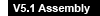
<style>
.page{position:relative;width:100px;height:16px;background:#000000}
.page>*{position:absolute;margin:0}
.t1{font:11px "Arial-BoldMT";color:#ffffff}
</style>
<div class="page">
<p class="t1" style="left:13px;top:4px;width:77px;height:10px">V5.1 Assembly</p>
</div>
